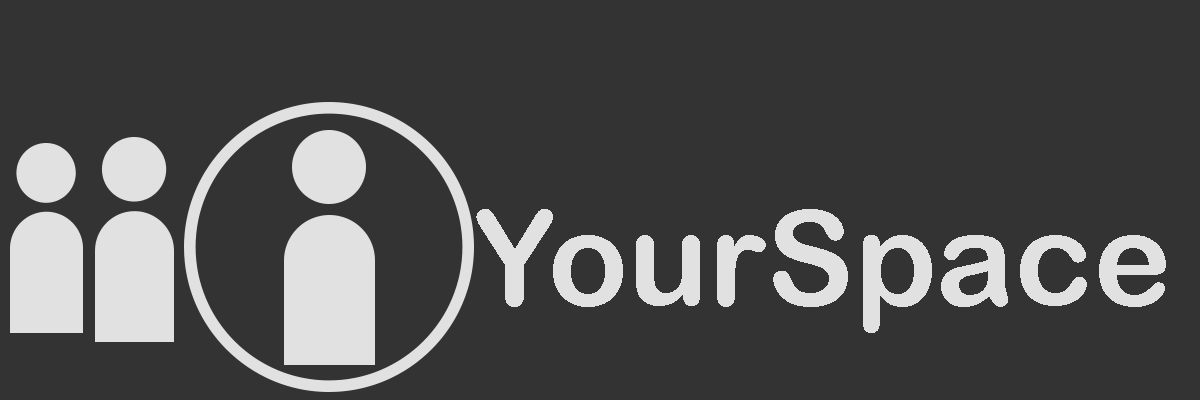
<style>
.page{position:relative;width:1200px;height:400px;background:#333333}
.page>*{position:absolute;margin:0}
.t1{font:132px "ArialRoundedMTBold";color:#e1e1e1}
</style>
<div class="page">
<p class="t1" style="left:476px;top:209px;width:690px;height:124px">YourSpace</p>
</div>
